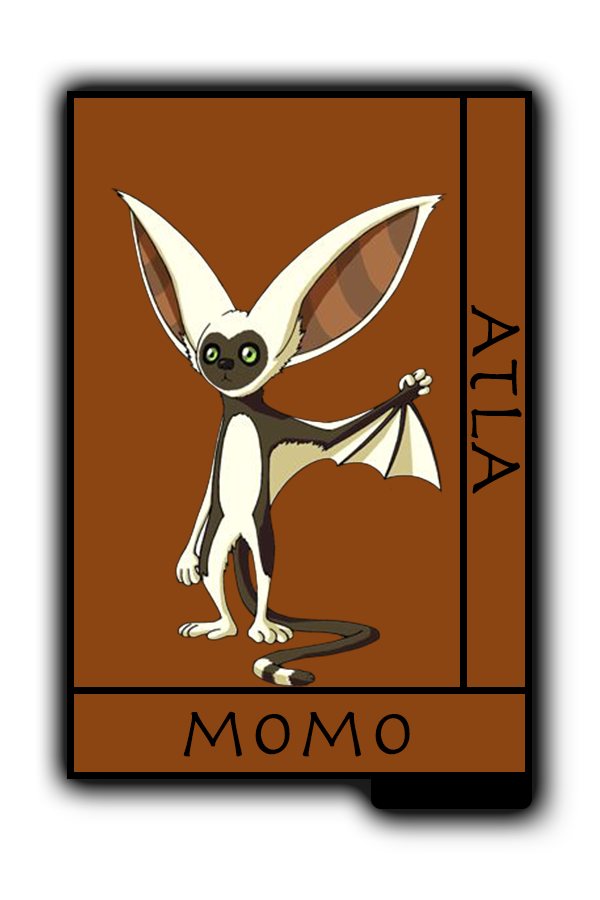
<style>
.page{position:relative;width:600px;height:900px;background:#8a4513}
.page>*{position:absolute;margin:0}
.t1{font:80.7px "Herculanum";color:#000000}
.t2{font:75px "Herculanum";color:#000000}
</style>
<div class="page">
<p class="t1" style="left:470px;top:305px;width:52px;height:189px;rotate:90deg">ATLA</p>
<p class="t2" style="left:183px;top:711px;width:227px;height:46px">momo</p>
</div>
